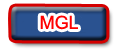
<style>
.page{position:relative;width:120px;height:50px;background:#ffffff}
.page>*{position:absolute;margin:0}
.t1{font:18px "ArialMT";color:#ff0000}
</style>
<div class="page">
<p class="t1" style="left:40px;top:15px;width:38px;height:15px">MGL</p>
</div>
